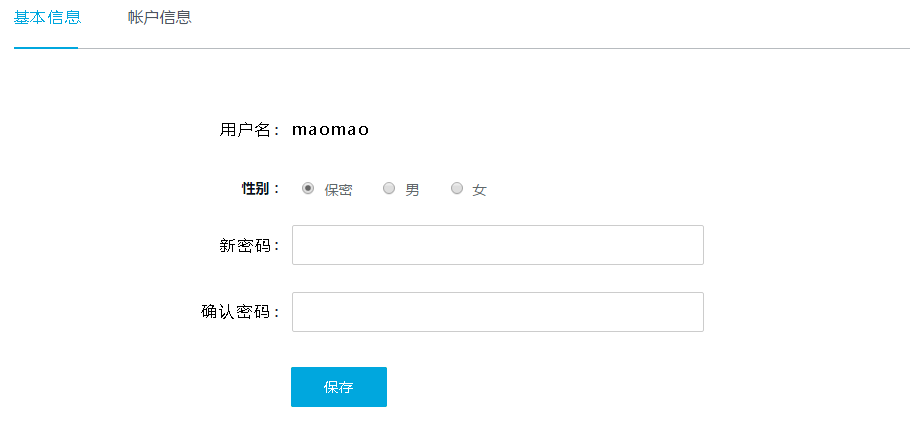
<style>
.page{position:relative;width:923px;height:439px;background:#ffffff}
.page>*{position:absolute;margin:0}
.t1{font:16px "MicrosoftYaHei";letter-spacing:0.1em;color:#00a7de;text-transform:uppercase}
.t2{font:16px "MicrosoftYaHei";letter-spacing:0.1em;color:#000000;text-transform:uppercase}
.t3{font:16px "MicrosoftYaHei";letter-spacing:0.1em;color:#000000}
.t4{font:14px "MicrosoftYaHei";letter-spacing:0.1em;color:#ffffff;text-transform:uppercase}
</style>
<div class="page">
<p class="t1" style="left:14px;top:10px;width:67px;height:14px">基本信息</p>
<p class="t2" style="left:220px;top:122px;width:49px;height:15px">用户名</p>
<p class="t3" style="left:293px;top:126px;width:75px;height:9px">maomao</p>
<p class="t2" style="left:220px;top:238px;width:50px;height:15px">新密码</p>
<p class="t2" style="left:201px;top:304px;width:68px;height:15px">确认密码</p>
<p class="t4" style="left:324px;top:381px;width:29px;height:12px">保存</p>
</div>
